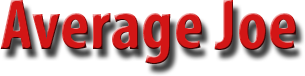
<style>
.page{position:relative;width:305px;height:76px;background:#ffffff}
.page>*{position:absolute;margin:0}
.t1{font:72px "MyriadPro-BoldCond";color:#d31616}
</style>
<div class="page">
<p class="t1" style="left:0px;top:0px;width:296px;height:64px">Average Joe</p>
</div>
